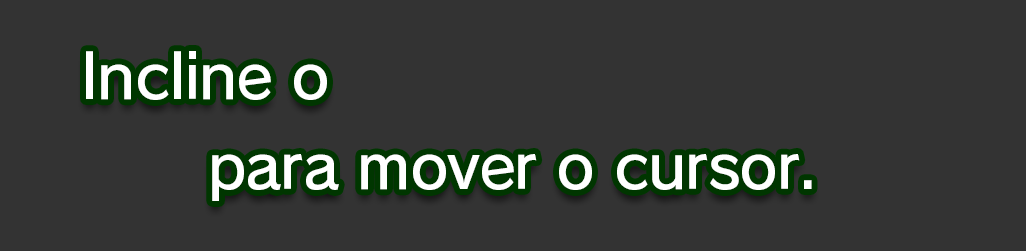
<style>
.page{position:relative;width:1026px;height:251px;background:#333333}
.page>*{position:absolute;margin:0}
.t1{font:61.3px/90.7px "RodinPro-DB";letter-spacing:-0.022em}
.t2{font:69.3px/90.7px "NewRodinPro-DB";letter-spacing:-0.022em}
</style>
<div class="page">
<p class="t1" style="left:86px;top:44px;width:857px;height:157px;text-align:center">Incline o <span class="t2">Joy-Con Direito</span><br>para mover o cursor.</p>
</div>
